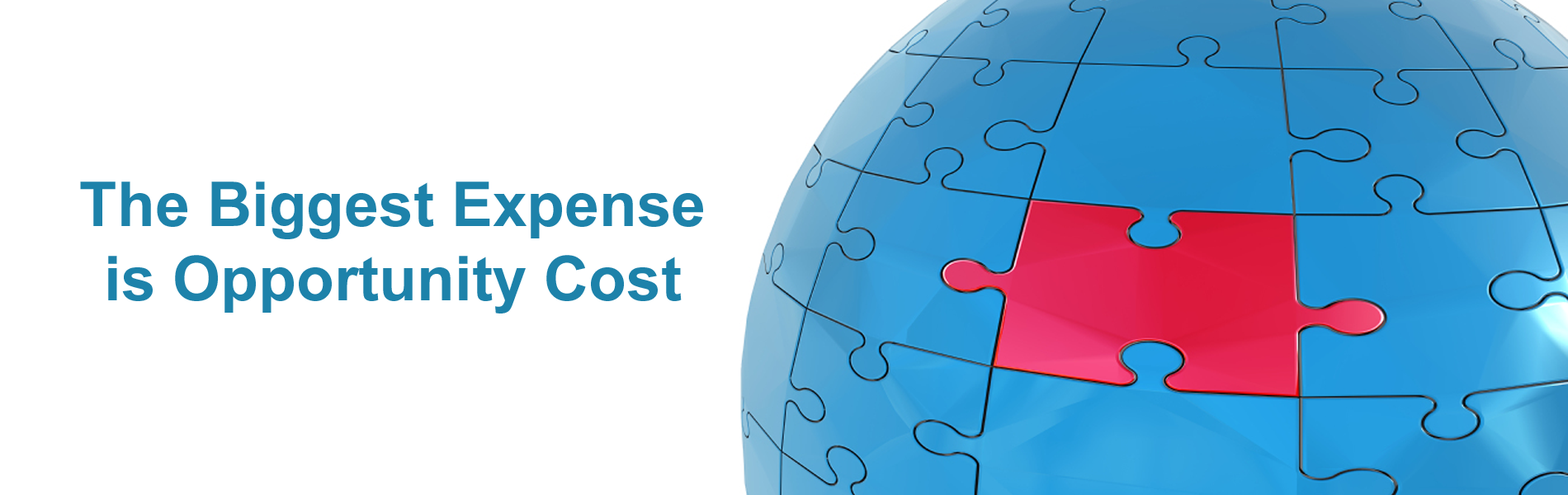
<style>
.page{position:relative;width:1568px;height:495px;background:#ffffff}
.page>*{position:absolute;margin:0}
.t1{font:61.9px "Arial-BoldMT";color:#1d82aa}
</style>
<div class="page">
<p class="t1" style="left:80px;top:182px;width:623px;height:132px;text-align:center">The Biggest Expense<br>is Opportunity Cost</p>
</div>
